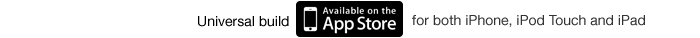
<style>
.page{position:relative;width:700px;height:38px;background:#ffffff}
.page>*{position:absolute;margin:0}
.t1{font:14px "HelveticaNeue";color:#000000}
.t2{font:14px "HelveticaNeue";color:#333333}
</style>
<div class="page">
<p class="t1" style="left:198px;top:16px;width:91px;height:11px">Universal build</p>
<p class="t2" style="left:412px;top:15px;width:233px;height:12px">for both iPhone, iPod Touch and iPad</p>
</div>
